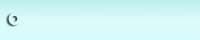
<style>
.page{position:relative;width:200px;height:40px;background:#d9fbfa}
.page>*{position:absolute;margin:0}
.t1{font:49.7px "SimSun";letter-spacing:0.2em;color:#c1efec;text-transform:uppercase;font-weight:bold;scale:0.94 1}
</style>
<div class="page">
<p class="t1" style="left:8px;top:12px;width:13px;height:13px">。</p>
</div>
